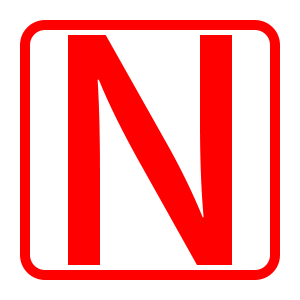
<style>
.page{position:relative;width:300px;height:300px;background:#ffffff}
.page>*{position:absolute;margin:0}
.t1{font:300px "AdobeHeitiStd-Regular";color:#ff0000}
</style>
<div class="page">
<p class="t1" style="left:68px;top:35px;width:164px;height:230px">N</p>
</div>
